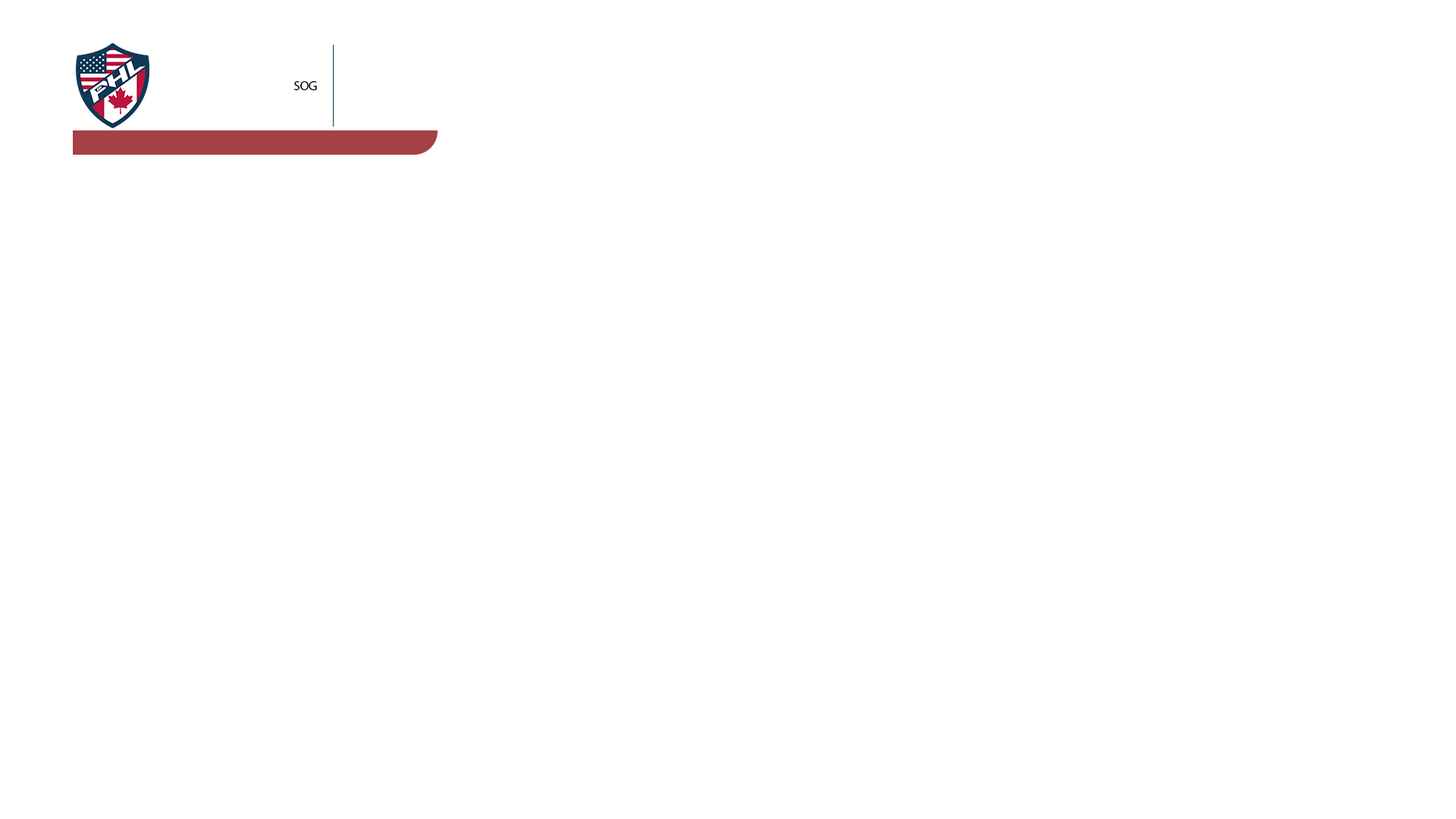
<style>
.page{position:relative;width:1456px;height:819px;background:#ffffff}
.page>*{position:absolute;margin:0}
.t1{font:12.9px "MyriadPro-Regular";letter-spacing:-0.035em;color:#000000;scale:1.04 1}
</style>
<div class="page">
<p class="t1" style="left:294px;top:81px;width:23px;height:9px">SOG</p>
</div>
